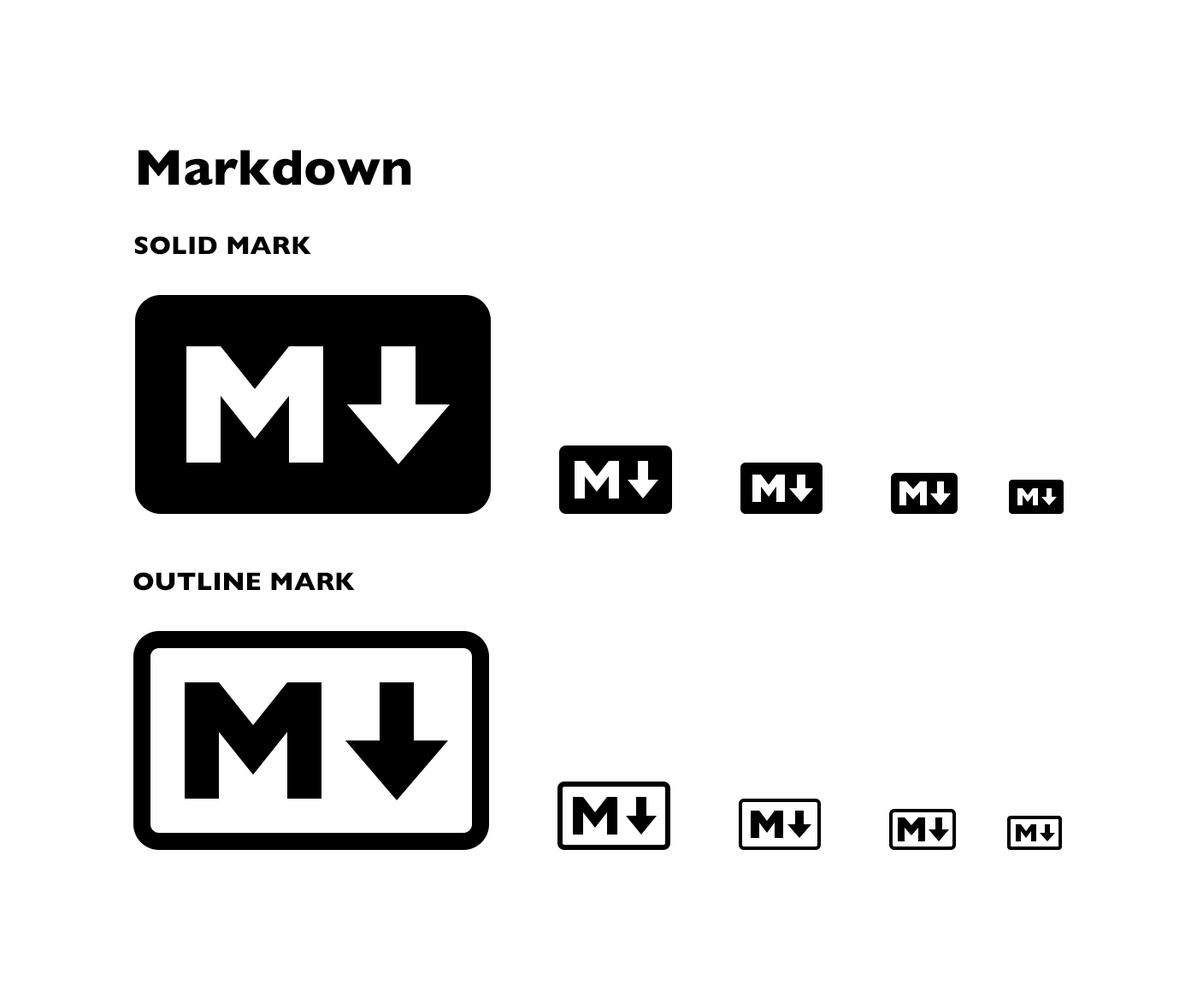
<style>
.page{position:relative;width:1197px;height:997px;background:#ffffff}
.page>*{position:absolute;margin:0}
.t1{font:51.3px "GillSans-Bold";color:#000000}
.t2{font:25.6px "GillSans-Bold";color:#000000}
</style>
<div class="page">
<p class="t1" style="left:138px;top:150px;width:273px;height:35px">Markdown</p>
<p class="t2" style="left:134px;top:236px;width:177px;height:19px">SOLID MARK</p>
<p class="t2" style="left:133px;top:572px;width:222px;height:19px">OUTLINE MARK</p>
</div>
